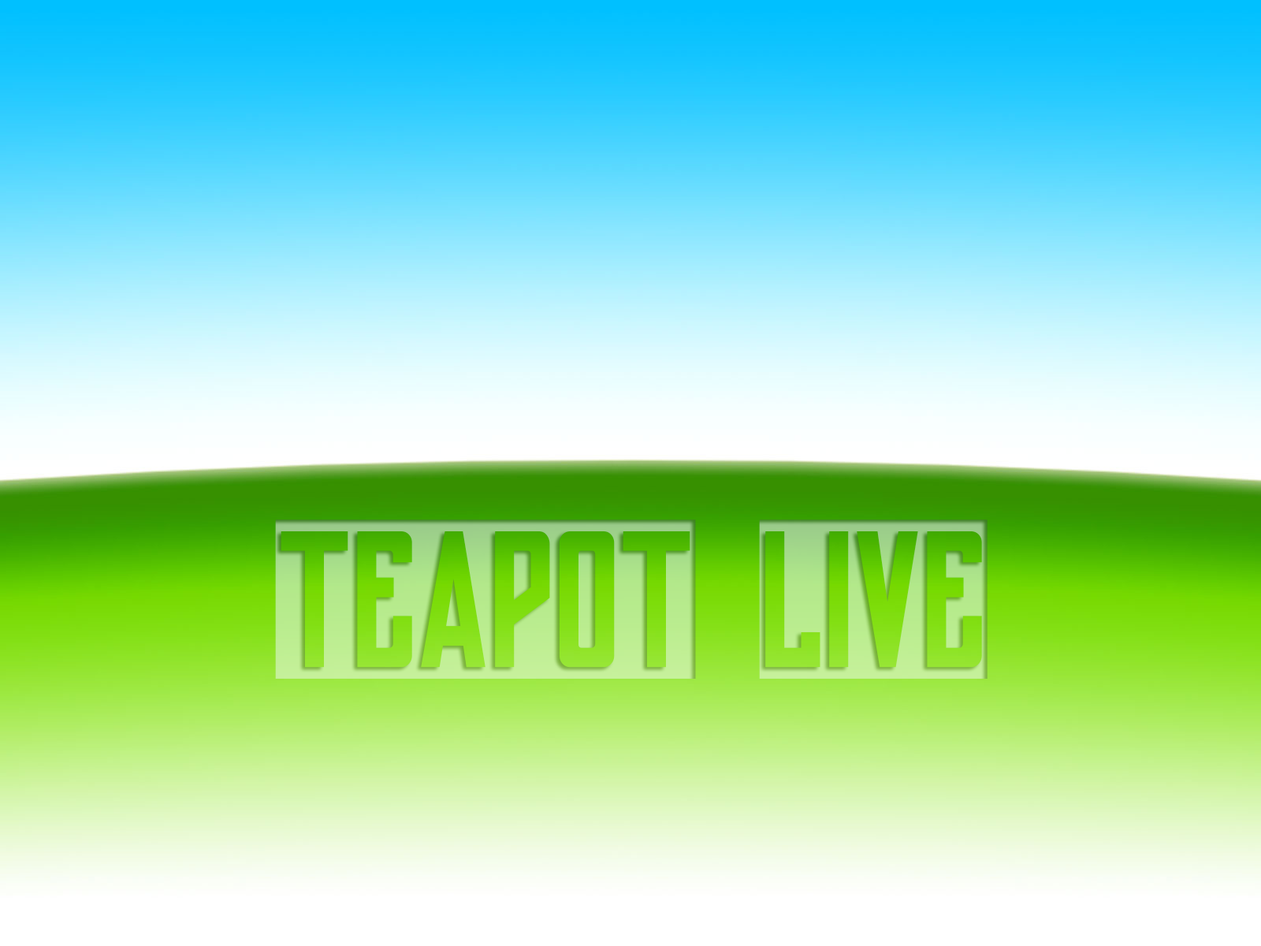
<style>
.page{position:relative;width:1261px;height:946px}
.page>*{position:absolute;margin:0}
.t1{font:198.6px "yorkwhiteletter"}
</style>
<div class="page">
<p class="t1" style="left:275px;top:519px;width:712px;height:160px">TEAPOT LIVE</p>
</div>
